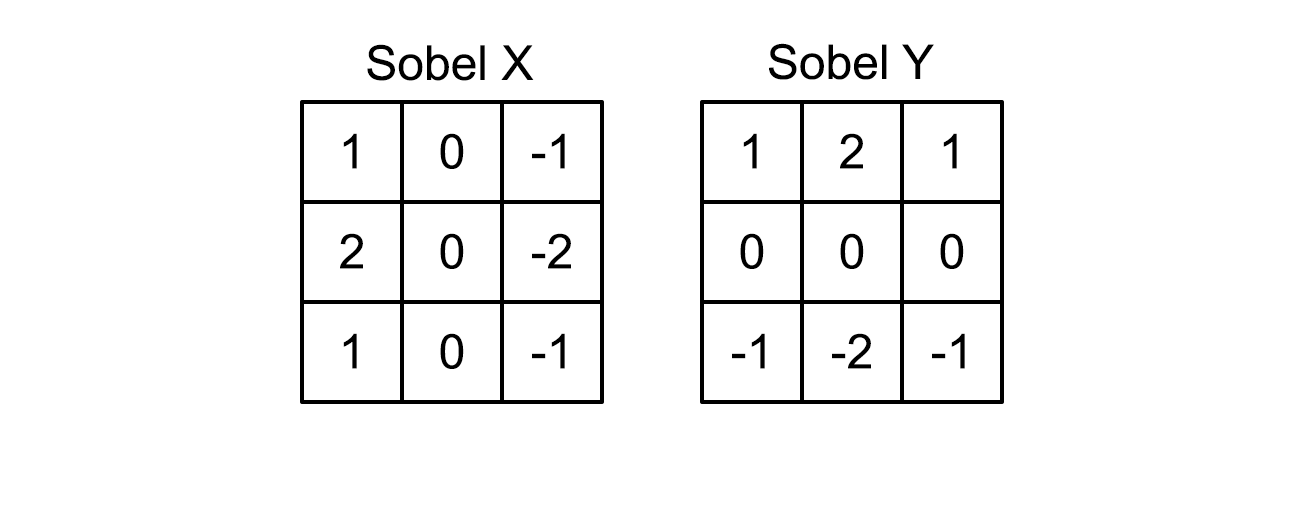
<style>
.page{position:relative;width:1305px;height:505px;background:#ffffff}
.page>*{position:absolute;margin:0}
.t1{font:48px "ArialMT";color:#000000}
</style>
<div class="page">
<p class="t1" style="left:367px;top:44px;width:167px;height:37px">Sobel X</p>
<p class="t1" style="left:769px;top:43px;width:165px;height:37px">Sobel Y</p>
<p class="t1" style="left:343px;top:133px;width:14px;height:36px">1</p>
<p class="t1" style="left:440px;top:133px;width:24px;height:36px">0</p>
<p class="t1" style="left:532px;top:133px;width:33px;height:36px">-1</p>
<p class="t1" style="left:743px;top:133px;width:14px;height:36px">1</p>
<p class="t1" style="left:840px;top:133px;width:23px;height:36px">2</p>
<p class="t1" style="left:943px;top:133px;width:14px;height:36px">1</p>
<p class="t1" style="left:340px;top:233px;width:23px;height:36px">2</p>
<p class="t1" style="left:440px;top:233px;width:24px;height:36px">0</p>
<p class="t1" style="left:532px;top:233px;width:39px;height:36px">-2</p>
<p class="t1" style="left:740px;top:233px;width:24px;height:36px">0</p>
<p class="t1" style="left:840px;top:233px;width:24px;height:36px">0</p>
<p class="t1" style="left:940px;top:233px;width:24px;height:36px">0</p>
<p class="t1" style="left:343px;top:333px;width:14px;height:36px">1</p>
<p class="t1" style="left:440px;top:333px;width:24px;height:36px">0</p>
<p class="t1" style="left:532px;top:333px;width:33px;height:36px">-1</p>
<p class="t1" style="left:732px;top:333px;width:33px;height:36px">-1</p>
<p class="t1" style="left:832px;top:333px;width:39px;height:36px">-2</p>
<p class="t1" style="left:932px;top:333px;width:33px;height:36px">-1</p>
</div>
